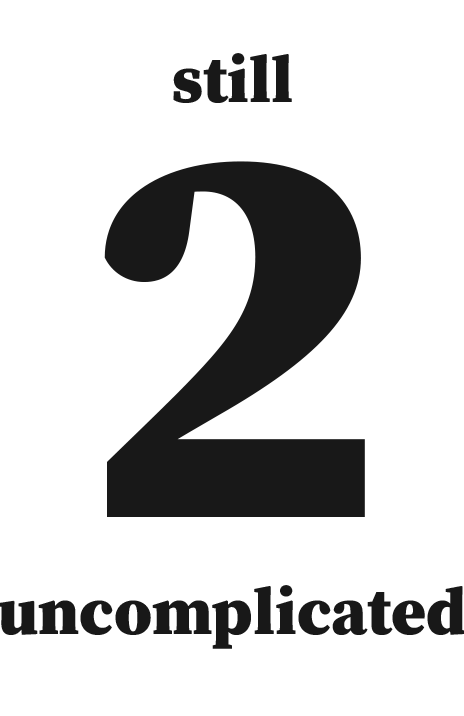
<style>
.page{position:relative;width:464px;height:716px;background:#ffffff}
.page>*{position:absolute;margin:0}
.t1{font:66.7px "SourceSerifRoman-Black";color:#181818}
.t2{font:555.6px "SourceSerifRoman-Black";color:#181818}
</style>
<div class="page">
<p class="t1" style="left:173px;top:53px;width:119px;height:50px">still</p>
<p class="t2" style="left:104px;top:161px;width:261px;height:356px">2</p>
<p class="t1" style="left:0px;top:585px;width:465px;height:64px">uncomplicated</p>
</div>
